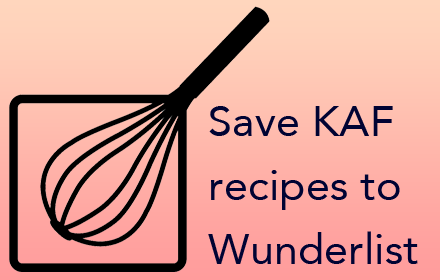
<style>
.page{position:relative;width:440px;height:280px}
.page>*{position:absolute;margin:0}
.t1{font:42.9px/64px "Avenir-Roman";letter-spacing:0.005em;color:#000333}
</style>
<div class="page">
<p class="t1" style="left:208px;top:106px;width:210px;height:158px">Save KAF<br>recipes to<br>Wunderlist</p>
</div>
